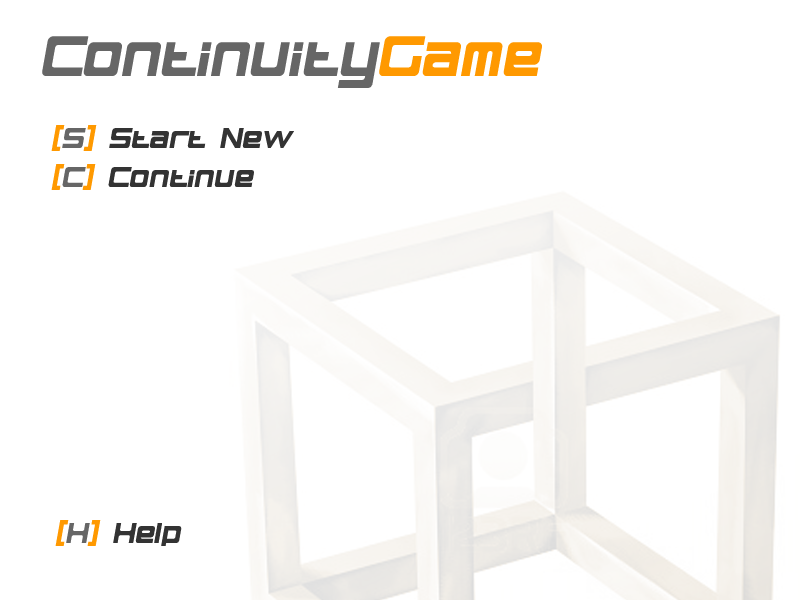
<style>
.page{position:relative;width:800px;height:600px;background:#ffffff}
.page>*{position:absolute;margin:0}
.t1{font:60px "BNElements";color:#666666}
.t2{font:60px "BNElements";color:#ff9900}
.t3{font:30px "BNElements";color:#333333}
.t4{font:30px "BNElements";color:#ff9900}
.t5{font:30px "BNElements";color:#666666}
</style>
<div class="page">
<p class="t1" style="left:42px;top:36px;width:500px;height:52px">Continuity<span class="t2">Game</span></p>
<p class="t3" style="left:51px;top:125px;width:243px;height:26px"><span class="t4">[</span><span class="t5">S</span><span class="t4">] </span>Start New</p>
<p class="t3" style="left:51px;top:164px;width:203px;height:26px"><span class="t4">[</span><span class="t5">C</span><span class="t4">] </span>Continue</p>
<p class="t3" style="left:55px;top:520px;width:127px;height:26px"><span class="t4">[</span><span class="t5">H</span><span class="t4">] </span>Help</p>
</div>
